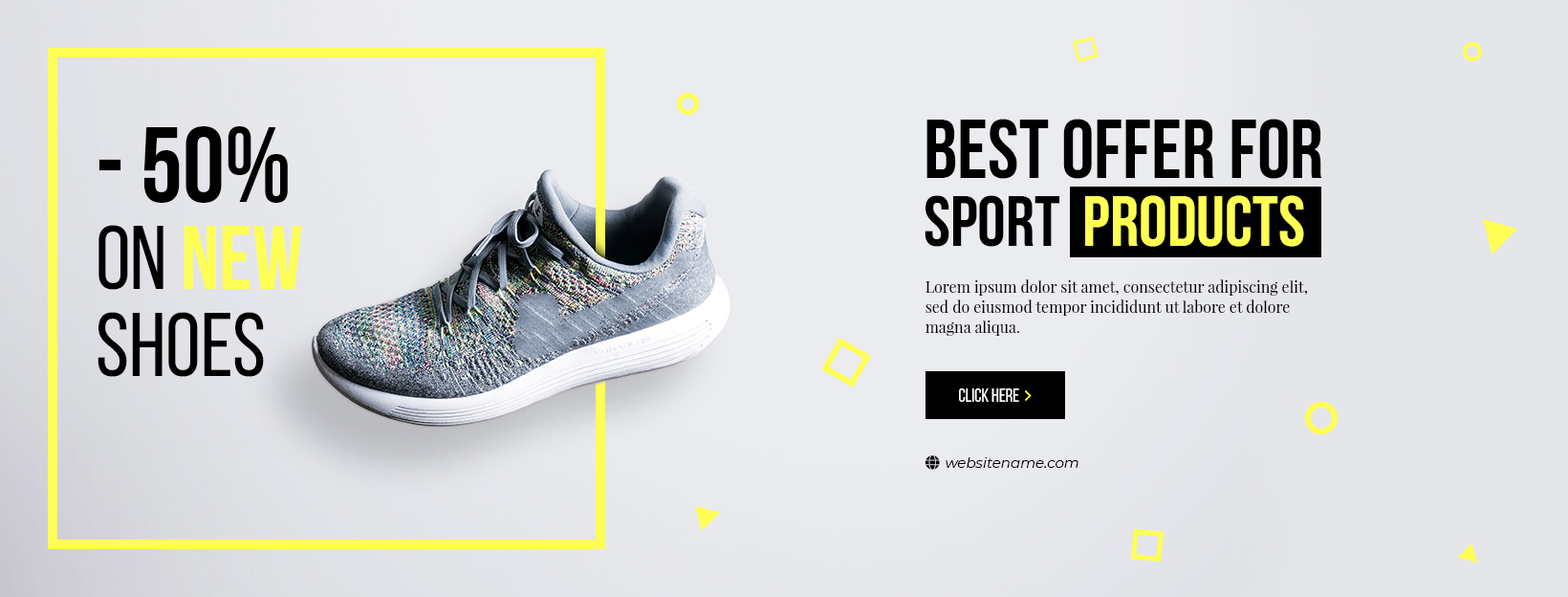
<style>
.page{position:relative;width:1568px;height:597px;background:#ebecf0}
.page>*{position:absolute;margin:0}
.t1{font:83.2px/67.9px "BebasNeueBold";color:#000000;text-transform:uppercase}
.t2{font:71.7px/67.9px "BebasNeueBold";color:#000000;text-transform:uppercase}
.t3{font:71.7px/67.9px "BebasNeueBold";color:#fffe54;text-transform:uppercase}
.t4{font:106.1px/87px "BebasNeueBold";color:#000000;text-transform:uppercase}
.t5{font:89.9px/87px "BebasNeueRegular";color:#000000;text-transform:uppercase}
.t6{font:89.9px/87px "BebasNeueBold";color:#fffe54;text-transform:uppercase}
.t7{font:15.3px/20.1px "PlayfairDisplay-Regular";color:#000000}
</style>
<div class="page">
<p class="t1" style="left:925px;top:119px;width:397px;height:128px">Best Offer For<br><span class="t2">Sport  </span><span class="t3">Products</span></p>
<p class="t4" style="left:98px;top:126px;width:204px;height:251px">- 50%<br><span class="t5">on </span><span class="t6">new<br></span><span class="t5">shoes</span></p>
<p class="t7" style="left:926px;top:279px;width:382px;height:57px">Lorem ipsum dolor sit amet, consectetur adipiscing elit, sed do eiusmod tempor incididunt ut labore et dolore magna aliqua.</p>
</div>
